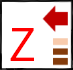
<style>
.page{position:relative;width:73px;height:70px;background:#ffffff}
.page>*{position:absolute;margin:0}
.t1{font:48px "MyriadPro-Regular";color:#ff0000}
</style>
<div class="page">
<p class="t1" style="left:10px;top:28px;width:24px;height:33px">Z</p>
</div>
